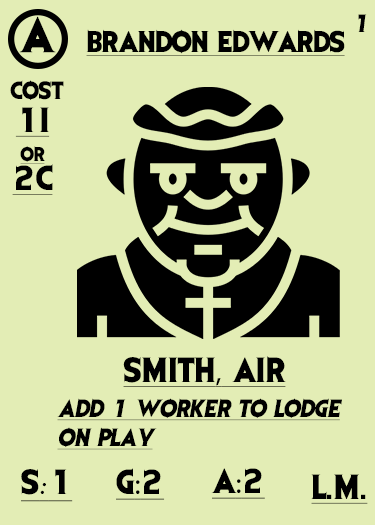
<style>
.page{position:relative;width:375px;height:525px;background:#e3edb5}
.page>*{position:absolute;margin:0}
.t1{font:41.7px "EvilDead";letter-spacing:-0.05em;color:#000000}
.t2{font:20.8px "EvilDead";color:#000000}
.t3{font:25px "EvilDead";letter-spacing:-0.025em;color:#000000;text-decoration:underline}
.t4{font:29.2px/29.2px "EvilDead";color:#000000;text-decoration:underline}
.t5{font:16.7px/29.2px "EvilDead";color:#000000;text-decoration:underline}
.t6{font:29.2px "EvilDead";color:#000000;text-decoration:underline}
.t7{font:29.2px "MyriadPro-Regular";color:#000000;text-decoration:underline}
.t8{font:20.8px/29.2px "EvilDead";color:#000000;font-style:italic;text-decoration:underline}
.t9{font:29.2px "Fadli-Script";color:#000000;text-decoration:underline}
</style>
<div class="page">
<p class="t1" style="left:19px;top:16px;width:37px;height:37px">A</p>
<p class="t2" style="left:358px;top:14px;width:9px;height:18px">7</p>
<p class="t3" style="left:86px;top:29px;width:259px;height:27px">BRANDON EDWARDS</p>
<p class="t2" style="left:10px;top:80px;width:54px;height:20px">COST</p>
<p class="t4" style="left:12px;top:107px;width:41px;height:88px;text-align:center">1I<br><span class="t5">or<br></span>2C</p>
<p class="t6" style="left:123px;top:356px;width:163px;height:31px">SMITH<span class="t7">,</span> AIR</p>
<p class="t8" style="left:57px;top:398px;width:285px;height:52px">Add 1 worker to lodge<br>ON PLAY</p>
<p class="t6" style="left:21px;top:469px;width:52px;height:33px">S<span class="t9">:</span>1</p>
<p class="t6" style="left:116px;top:468px;width:49px;height:32px">G<span class="t7">:</span>2</p>
<p class="t6" style="left:211px;top:468px;width:54px;height:31px">A<span class="t7">:</span>2</p>
<p class="t6" style="left:311px;top:474px;width:57px;height:30px">L.M.</p>
</div>
